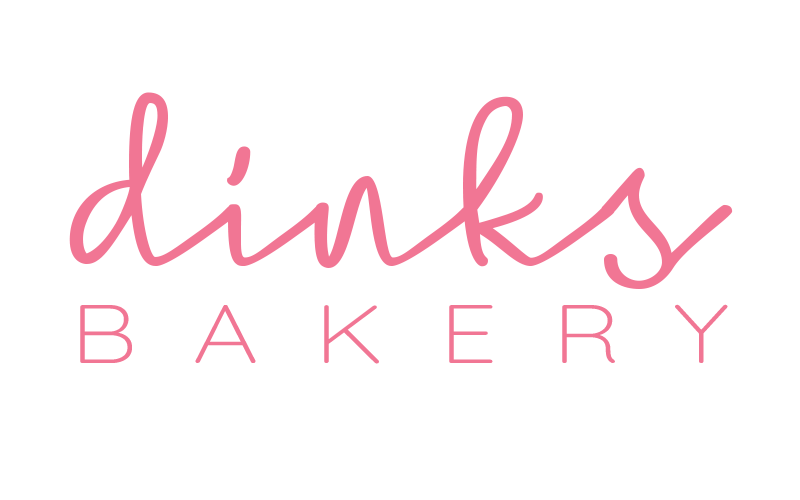
<style>
.page{position:relative;width:800px;height:500px;background:#ffffff}
.page>*{position:absolute;margin:0}
.t1{font:265px "SimpleSignature";color:#f17694;scale:1.25 1}
.t2{font:82.6px "Quicksand-Light";letter-spacing:0.53em;color:#f17694;scale:1.25 1}
</style>
<div class="page">
<p class="t1" style="left:69px;top:92px;width:664px;height:197px">dinks</p>
<p class="t2" style="left:80px;top:304px;width:648px;height:60px">BAKERY</p>
</div>
